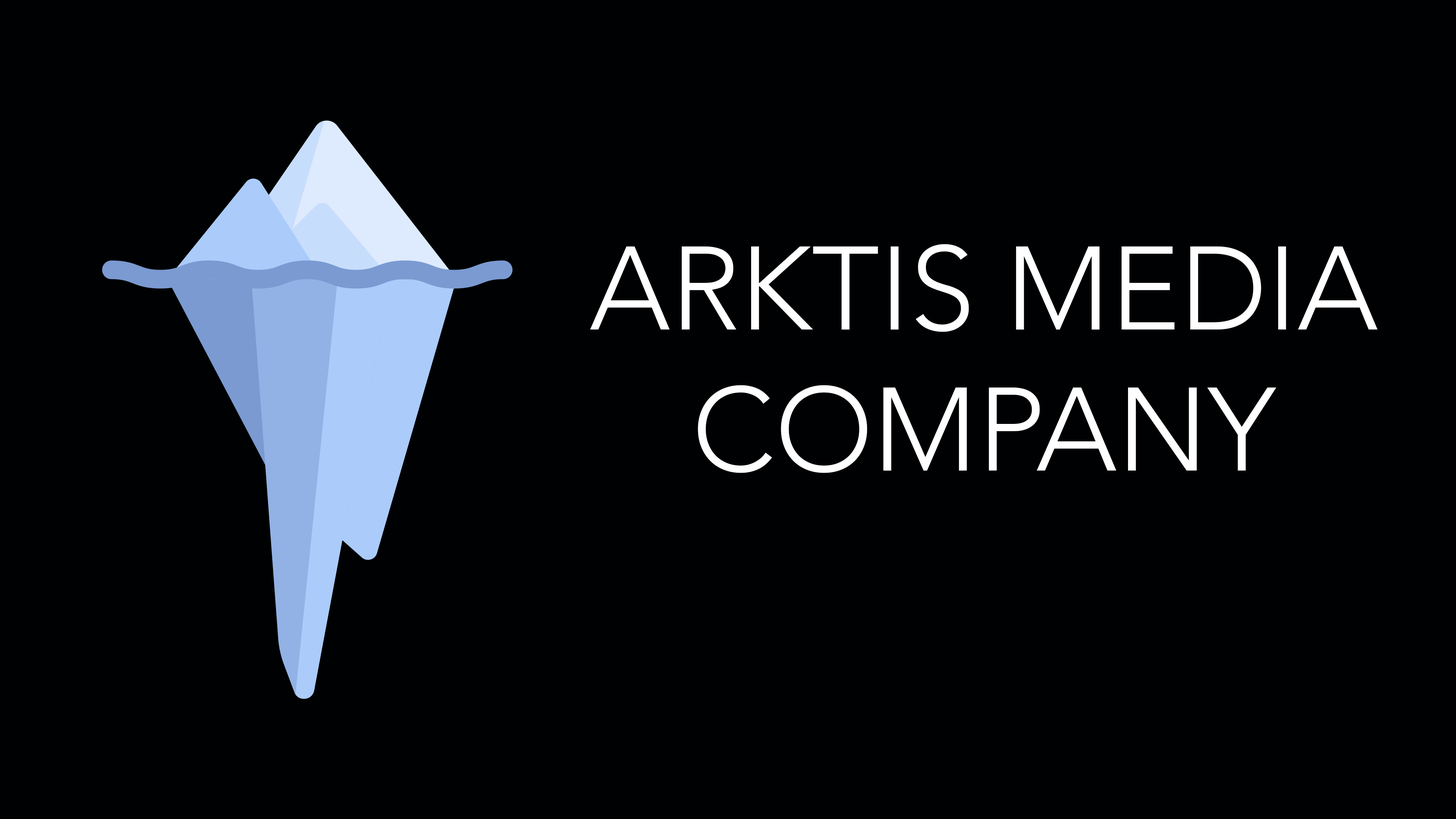
<style>
.page{position:relative;width:1456px;height:819px;background:#000102}
.page>*{position:absolute;margin:0}
.t1{font:117.5px "Avenir-Light";color:#ffffff}
</style>
<div class="page">
<p class="t1" style="left:590px;top:244px;width:787px;height:229px;text-align:center">ARKTIS MEDIA COMPANY</p>
</div>
